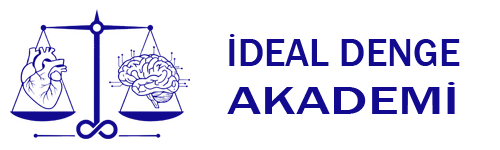
<style>
.page{position:relative;width:500px;height:150px;background:#ffffff}
.page>*{position:absolute;margin:0}
.t1{font:40px "FranklinGothic-Medium";color:#120a8f}
.t2{font:40px "FranklinGothic-Medium";color:#120a8f;scale:1.42 1}
</style>
<div class="page">
<p class="t1" style="left:227px;top:34px;width:233px;height:80px">İDEAL DENGE <br><span class="t2">AKADEMİ</span></p>
</div>
